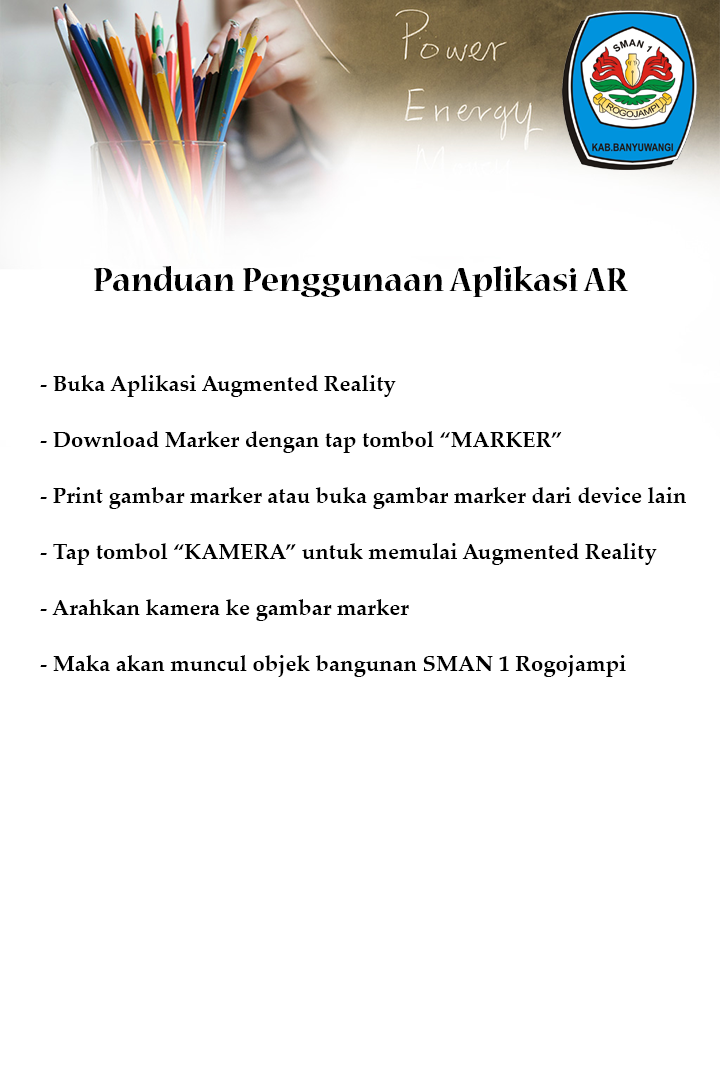
<style>
.page{position:relative;width:720px;height:1080px;background:#ffffff}
.page>*{position:absolute;margin:0}
.t1{font:35.9px "NuevaStd-Bold";color:#000000}
.t2{font:22px/56px "PalatinoLinotype-Bold";color:#000000}
</style>
<div class="page">
<p class="t1" style="left:94px;top:266px;width:535px;height:31px">Panduan Penggunaan Aplikasi AR</p>
<p class="t2" style="left:40px;top:375px;width:646px;height:302px">- Buka Aplikasi Augmented Reality<br>- Download Marker dengan tap tombol “MARKER”<br>- Print gambar marker atau buka gambar marker dari device lain<br>- Tap tombol “KAMERA” untuk memulai Augmented Reality<br>- Arahkan kamera ke gambar marker<br>- Maka akan muncul objek bangunan SMAN 1 Rogojampi</p>
</div>
